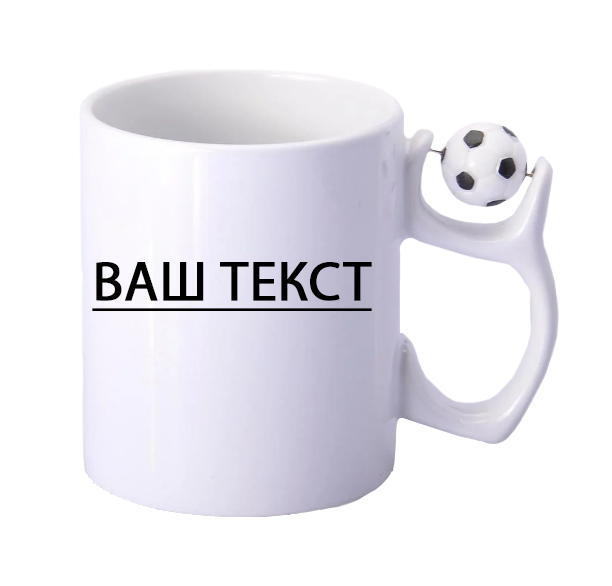
<style>
.page{position:relative;width:612px;height:586px;background:#ffffff}
.page>*{position:absolute;margin:0}
.t1{font:55px "MyriadPro-Regular";color:#000000;text-transform:uppercase;font-weight:bold;text-decoration:underline}
</style>
<div class="page">
<p class="t1" style="left:92px;top:262px;width:280px;height:49px">ваш текст</p>
</div>
